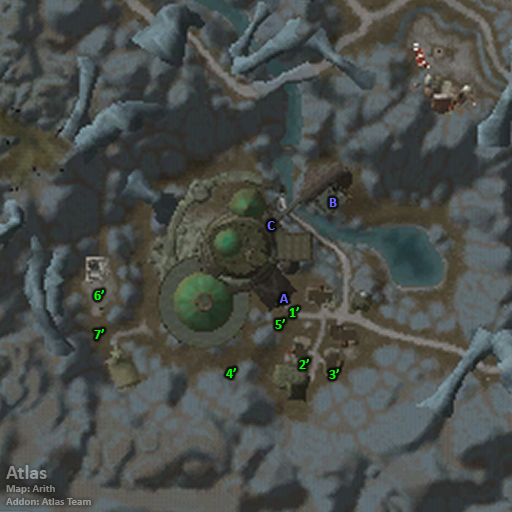
<style>
.page{position:relative;width:512px;height:512px}
.page>*{position:absolute;margin:0}
.t1{font:14px "Calibri-Bold";color:#6666ff}
.t2{font:14px "Calibri-Bold";color:#00ff00}
.t3{font:11px "Calibri-Bold";color:#909190}
.t4{font:20px "Calibri-Bold";color:#909190}
</style>
<div class="page">
<p class="t1" style="left:329px;top:198px;width:8px;height:9px">B</p>
<p class="t1" style="left:267px;top:221px;width:8px;height:9px">C</p>
<p class="t2" style="left:94px;top:290px;width:10px;height:10px">6’</p>
<p class="t1" style="left:279px;top:294px;width:9px;height:9px">A</p>
<p class="t2" style="left:289px;top:307px;width:10px;height:10px">1’</p>
<p class="t2" style="left:94px;top:329px;width:10px;height:10px">7’</p>
<p class="t2" style="left:275px;top:319px;width:10px;height:10px">5’</p>
<p class="t2" style="left:299px;top:359px;width:10px;height:10px">2’</p>
<p class="t2" style="left:226px;top:368px;width:10px;height:10px">4’</p>
<p class="t2" style="left:329px;top:369px;width:10px;height:10px">3’</p>
<p class="t3" style="left:6px;top:465px;width:85px;height:40px"><span class="t4">Atlas<br></span>Map: Arith<br>Addon: Atlas Team</p>
</div>
